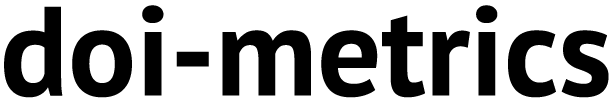
<style>
.page{position:relative;width:609px;height:100px;background:#ffffff}
.page>*{position:absolute;margin:0}
.t1{font:126.4px "PTSans-Bold";color:#000000}
</style>
<div class="page">
<p class="t1" style="left:4px;top:5px;width:605px;height:93px">doi-metrics</p>
</div>
